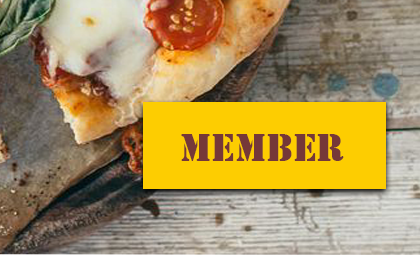
<style>
.page{position:relative;width:420px;height:255px}
.page>*{position:absolute;margin:0}
.t1{font:40px "Stencil";color:#753838}
</style>
<div class="page">
<p class="t1" style="left:181px;top:134px;width:163px;height:27px">MEMBER</p>
</div>
